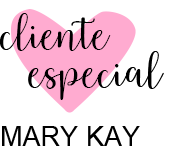
<style>
.page{position:relative;width:185px;height:163px;background:#ffffff}
.page>*{position:absolute;margin:0}
.t1{font:56.2px "ArbhieScript";color:#000000}
.t2{font:27.1px "ArialMT";color:#000000}
</style>
<div class="page">
<p class="t1" style="left:0px;top:13px;width:111px;height:38px">cliente</p>
<p class="t1" style="left:28px;top:51px;width:136px;height:49px">especial</p>
<p class="t2" style="left:2px;top:126px;width:138px;height:20px">MARY KAY</p>
</div>
